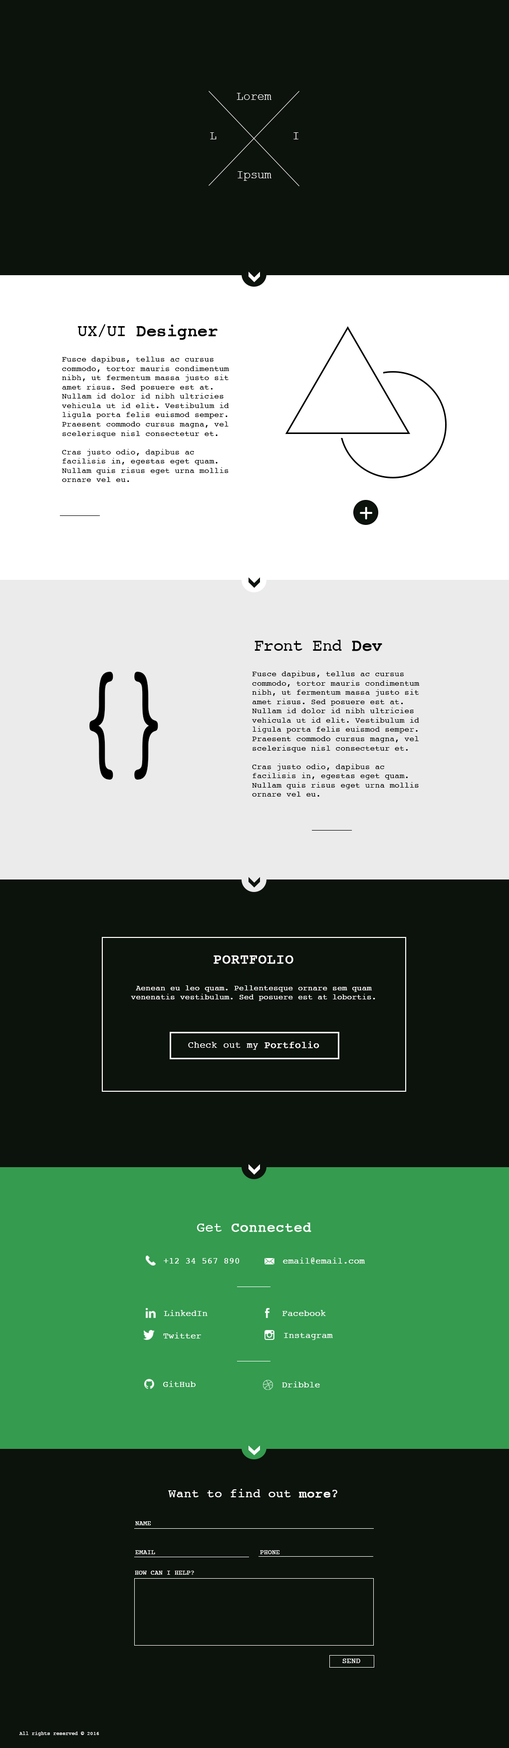
<style>
.page{position:relative;width:509px;height:1748px;background:#0c120c}
.page>*{position:absolute;margin:0}
.t1{font:12px "CourierNewPSMT";letter-spacing:-0.025em;color:#ffffff}
.t2{font:17px "Courier";letter-spacing:-0.025em;color:#000000;font-weight:bold}
.t3{font:17px "Courier";letter-spacing:-0.025em;color:#000000}
.t4{font:8px/9.3px "Courier";letter-spacing:0.015em;color:#000000}
.t5{font:24.2px "Courier";letter-spacing:0.015em;color:#ffffff}
.t6{font:132.5px "Courier";letter-spacing:0.015em;color:#000000;scale:0.55 1}
.t7{font:14px "Courier";letter-spacing:0.015em;color:#ffffff;text-transform:uppercase;font-weight:bold}
.t8{font:8px/9.3px "Courier";letter-spacing:0.015em;color:#ffffff}
.t9{font:9.5px "Courier";letter-spacing:0.015em;color:#ffffff}
.t10{font:9.5px "Courier";letter-spacing:0.015em;color:#ffffff;font-weight:bold}
.t11{font:14px "Courier";letter-spacing:0.015em;color:#ffffff;font-weight:bold}
.t12{font:14px "Courier";letter-spacing:0.015em;color:#ffffff}
.t13{font:9px "Courier";letter-spacing:0.015em;color:#ffffff}
.t14{font:9.2px "Courier";letter-spacing:0.015em;color:#ffffff;scale:0.97 1}
.t15{font:12.5px "Courier";letter-spacing:0.015em;color:#ffffff}
.t16{font:12.5px "Courier";letter-spacing:0.015em;color:#ffffff;font-weight:bold}
.t17{font:6.5px "Courier";letter-spacing:0.015em;color:#ffffff;text-transform:uppercase}
.t18{font:7.5px "Courier";letter-spacing:0.015em;color:#ffffff;text-transform:uppercase}
.t19{font:5px "Courier";letter-spacing:0.015em;color:#ffffff}
</style>
<div class="page">
<p class="t1" style="left:237px;top:93px;width:35px;height:7px">Lorem</p>
<p class="t1" style="left:210px;top:132px;width:7px;height:7px">L</p>
<p class="t1" style="left:294px;top:132px;width:5px;height:7px">I</p>
<p class="t1" style="left:238px;top:171px;width:34px;height:10px">Ipsum</p>
<p class="t2" style="left:78px;top:324px;width:140px;height:16px"><span class="t3">UX/UI </span>Designer</p>
<p class="t4" style="left:62px;top:356px;width:167px;height:126px">Fusce dapibus, tellus ac cursus commodo, tortor mauris condimentum nibh, ut fermentum massa justo sit amet risus. Sed posuere est at. Nullam id dolor id nibh ultricies vehicula ut id elit. Vestibulum id ligula porta felis euismod semper. Praesent commodo cursus magna, vel scelerisque nisl consectetur et.<br><br>Cras justo odio, dapibus ac <br>facilisis in, egestas eget quam. Nullam quis risus eget urna mollis ornare vel eu.</p>
<p class="t5" style="left:360px;top:507px;width:13px;height:12px">+</p>
<p class="t3" style="left:255px;top:640px;width:128px;height:11px">Front End <span class="t2">Dev</span></p>
<p class="t6" style="left:89px;top:672px;width:69px;height:108px">{}</p>
<p class="t4" style="left:252px;top:671px;width:168px;height:126px">Fusce dapibus, tellus ac cursus commodo, tortor mauris condimentum nibh, ut fermentum massa justo sit amet risus. Sed posuere est at. Nullam id dolor id nibh ultricies vehicula ut id elit. Vestibulum id ligula porta felis euismod semper. Praesent commodo cursus magna, vel scelerisque nisl consectetur et.<br><br>Cras justo odio, dapibus ac <br>facilisis in, egestas eget quam. Nullam quis risus eget urna mollis ornare vel eu.</p>
<p class="t7" style="left:214px;top:955px;width:80px;height:9px">Portfolio</p>
<p class="t8" style="left:131px;top:985px;width:245px;height:16px;text-align:center">Aenean eu leo quam. Pellentesque ornare sem quam venenatis vestibulum. Sed posuere est at lobortis.</p>
<p class="t9" style="left:188px;top:1041px;width:132px;height:9px">Check out my <span class="t10">Portfolio</span></p>
<p class="t11" style="left:197px;top:1223px;width:115px;height:9px"><span class="t12">Get </span>Connected</p>
<p class="t13" style="left:164px;top:1258px;width:76px;height:6px">+12 34 567 890</p>
<p class="t14" style="left:283px;top:1258px;width:83px;height:6px">email@email.com</p>
<p class="t13" style="left:164px;top:1310px;width:44px;height:6px">LinkedIn</p>
<p class="t13" style="left:282px;top:1310px;width:44px;height:6px">Facebook</p>
<p class="t13" style="left:163px;top:1333px;width:38px;height:6px">Twitter</p>
<p class="t13" style="left:284px;top:1333px;width:49px;height:7px">Instagram</p>
<p class="t13" style="left:163px;top:1381px;width:33px;height:6px">GitHub</p>
<p class="t13" style="left:282px;top:1382px;width:38px;height:6px">Dribble</p>
<p class="t15" style="left:168px;top:1489px;width:170px;height:9px">Want to find out <span class="t16">more</span>?</p>
<p class="t17" style="left:135px;top:1521px;width:16px;height:4px">Name</p>
<p class="t17" style="left:135px;top:1550px;width:20px;height:4px">email</p>
<p class="t17" style="left:260px;top:1550px;width:20px;height:4px">phone</p>
<p class="t17" style="left:135px;top:1571px;width:59px;height:4px">How can i help?</p>
<p class="t18" style="left:343px;top:1659px;width:18px;height:4px">send</p>
<p class="t19" style="left:19px;top:1732px;width:80px;height:4px">All rights reserved © 2016</p>
</div>
